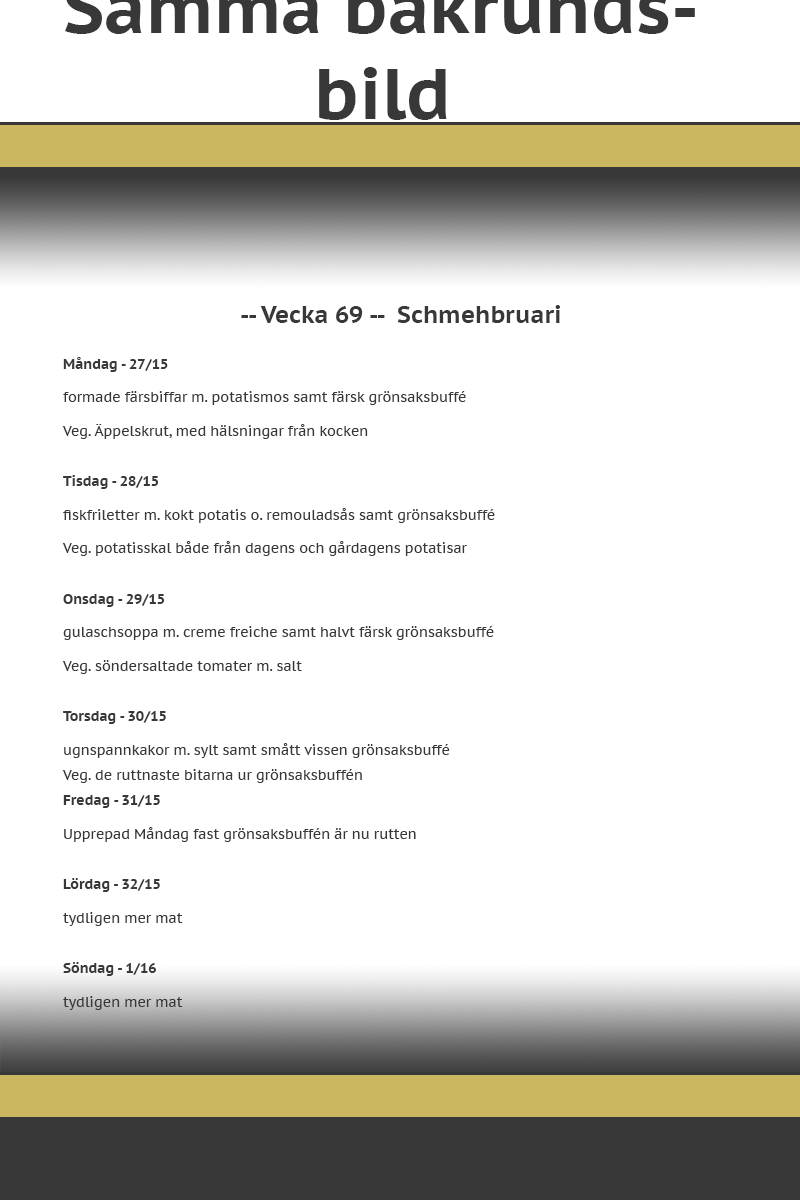
<style>
.page{position:relative;width:800px;height:1200px;background:#ffffff}
.page>*{position:absolute;margin:0}
.t1{font:14px "PTSans-Caption";color:#383838}
.t2{font:24px "PTSans-CaptionBold";color:#383838}
.t3{font:14px "PTSans-CaptionBold";color:#383838}
</style>
<div class="page">
<p class="t1" style="left:62px;top:305px;width:498px;height:705px;text-align:center"><span class="t2"><br>-- Vecka 69 --  Schmehbruari<br><br></span><span class="t3">Måndag - 27/15<br></span><br>formade färsbiffar m. potatismos samt färsk grönsaksbuffé<br><br>Veg. Äppelskrut, med hälsningar från kocken<br><br><br><span class="t3">Tisdag - 28/15<br><br></span>fiskfriletter m. kokt potatis o. remouladsås samt grönsaksbuffé<br><br>Veg. potatisskal både från dagens och gårdagens potatisar<br><span class="t3"><br><br>Onsdag - 29/15<br><br></span>gulaschsoppa m. creme freiche samt halvt färsk grönsaksbuffé<br><br>Veg. söndersaltade tomater m. salt<br><span class="t3"><br><br>Torsdag - 30/15<br><br></span>ugnspannkakor m. sylt samt smått vissen grönsaksbuffé<br><span class="t3"><br><br>Fredag - 31/15<br><br></span>Upprepad Måndag fast grönsaksbuffén är nu rutten<br><span class="t3"><br><br>Lördag - 32/15<br><br></span>tydligen mer mat<br><span class="t3"><br><br>Söndag - 1/16<br></span><br>tydligen mer mat</p>
<p class="t1" style="left:62px;top:769px;width:300px;height:14px">Veg. de ruttnaste bitarna ur grönsaksbuffén</p>
</div>
